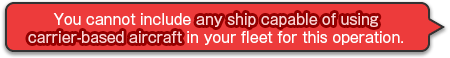
<style>
.page{position:relative;width:450px;height:58px;background:#ed3b3b}
.page>*{position:absolute;margin:0}
.t1{font:14px/18px "GothicMB101Pro-Regular";color:#ffd3d3}
.t2{font:14px/18px "GothicMB101Pro-Regular";color:#ffffff}
</style>
<div class="page">
<p class="t1" style="left:28px;top:13px;width:375px;height:32px;text-align:center"><span class="t2">You cannot include </span>any ship capable of using<br>carrier-based aircraft<span class="t2"> in your fleet for this operation.</span></p>
<p class="t1" style="left:28px;top:13px;width:375px;height:32px;text-align:center"><span class="t2">You cannot include </span>any ship capable of using<br>carrier-based aircraft<span class="t2"> in your fleet for this operation.</span></p>
</div>
